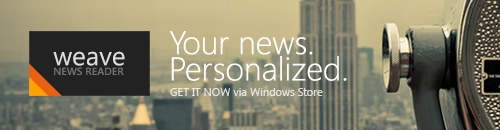
<style>
.page{position:relative;width:500px;height:130px}
.page>*{position:absolute;margin:0}
.t1{font:32.8px/26.3px "SegoeUI-Light";color:#ffffff}
.t2{font:10.4px/9.7px "SegoeUI-Semibold";color:#767676}
.t3{font:26.3px/9.7px "SegoeUI";color:#dfdfdf}
.t4{font:11px "SegoeUI";color:#e6e6e2}
</style>
<div class="page">
<p class="t1" style="left:169px;top:31px;width:178px;height:50px">Your news. <br>Personalized.</p>
<p class="t2" style="left:53px;top:51px;width:72px;height:24px"><span class="t3">weave<br></span>NEWS READER</p>
<p class="t4" style="left:170px;top:88px;width:153px;height:8px">GET IT NOW via Windows Store</p>
</div>
